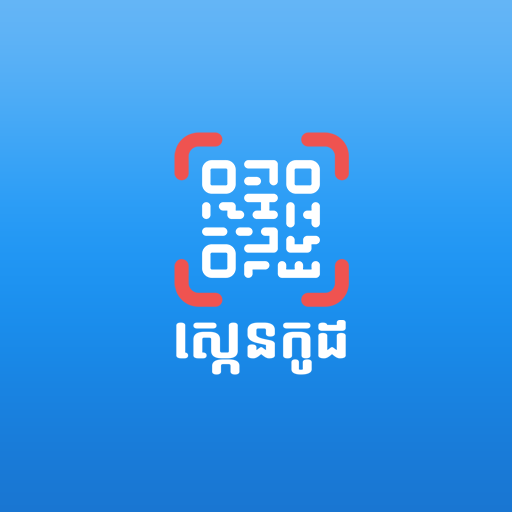
<style>
.page{position:relative;width:512px;height:512px}
.page>*{position:absolute;margin:0}
.t1{font:47.1px "Kh-Dangrek";letter-spacing:-0.02em;color:#ffffff;font-weight:bold;scale:1.23 1}
</style>
<div class="page">
<p class="t1" style="left:176px;top:320px;width:170px;height:55px">ស្កេនកូដ</p>
</div>
